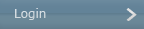
<style>
.page{position:relative;width:144px;height:29px}
.page>*{position:absolute;margin:0}
.t1{font:12px "Verdana";color:#d4dbdf}
</style>
<div class="page">
<p class="t1" style="left:15px;top:8px;width:31px;height:12px">Login</p>
</div>
